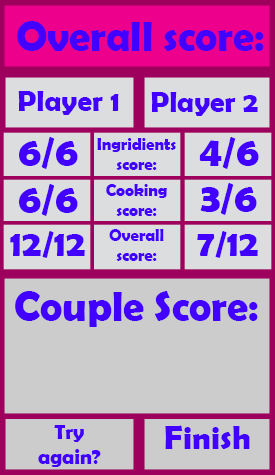
<style>
.page{position:relative;width:275px;height:475px;background:#cccccc}
.page>*{position:absolute;margin:0}
.t1{font:41.7px "BerlinSansFBDemi-Bold";color:#4200ff}
.t2{font:29.2px "BerlinSansFBDemi-Bold";color:#4200ff}
.t3{font:16.7px "BerlinSansFBDemi-Bold";color:#4200ff}
.t4{font:37.5px "BerlinSansFBDemi-Bold";color:#4200ff}
.t5{font:20.8px "BerlinSansFBDemi-Bold";color:#4200ff}
.t6{font:33.3px "BerlinSansFBDemi-Bold";color:#4200ff}
</style>
<div class="page">
<p class="t1" style="left:17px;top:21px;width:247px;height:30px">Overall score:</p>
<p class="t2" style="left:18px;top:91px;width:101px;height:24px">Player 1</p>
<p class="t2" style="left:151px;top:92px;width:107px;height:24px">Player 2</p>
<p class="t1" style="left:19px;top:137px;width:59px;height:32px">6/6</p>
<p class="t1" style="left:199px;top:137px;width:60px;height:32px">4/6</p>
<p class="t3" style="left:97px;top:138px;width:79px;height:32px;text-align:center">Ingridients score:</p>
<p class="t1" style="left:19px;top:184px;width:59px;height:32px">6/6</p>
<p class="t3" style="left:106px;top:184px;width:61px;height:32px;text-align:center">Cooking score:</p>
<p class="t1" style="left:200px;top:183px;width:57px;height:32px">3/6</p>
<p class="t4" style="left:10px;top:231px;width:75px;height:27px">12/12</p>
<p class="t3" style="left:109px;top:229px;width:55px;height:32px;text-align:center">Overall score:</p>
<p class="t4" style="left:197px;top:231px;width:61px;height:27px">7/12</p>
<p class="t1" style="left:15px;top:291px;width:243px;height:36px">Couple Score:</p>
<p class="t5" style="left:38px;top:425px;width:63px;height:42px;text-align:center">Try again?</p>
<p class="t6" style="left:165px;top:425px;width:85px;height:24px">Finish</p>
</div>
